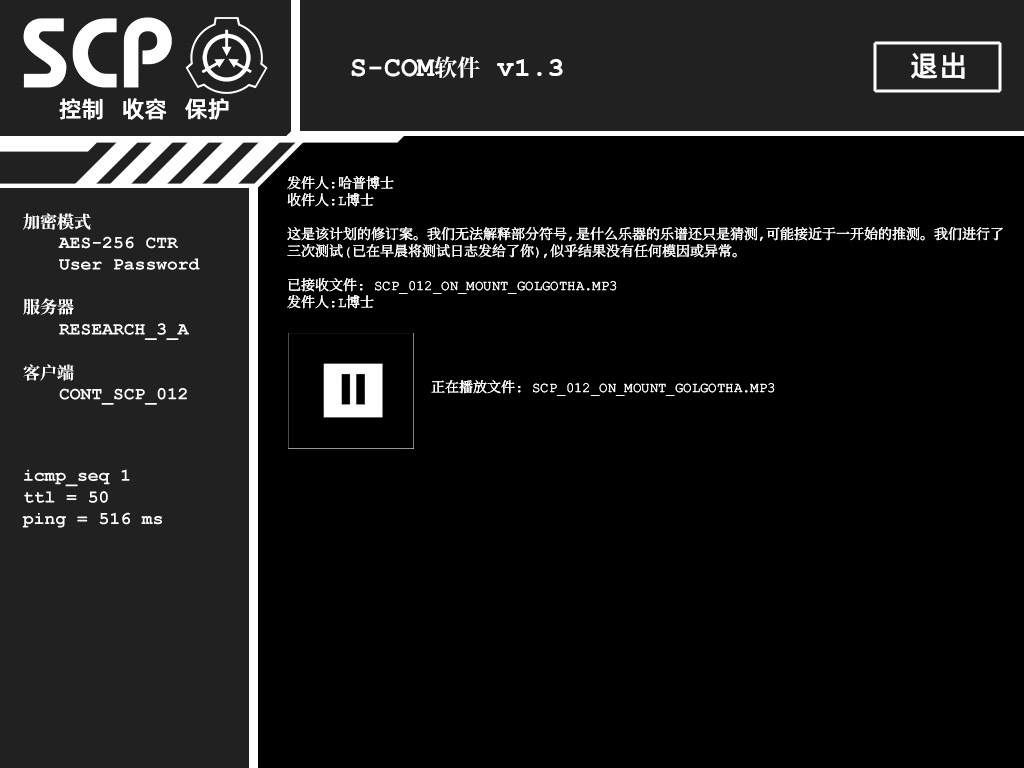
<style>
.page{position:relative;width:1024px;height:768px;background:#000000}
.page>*{position:absolute;margin:0}
.t1{font:29px "AlibabaPuHuiTiM";color:#ffffff}
.t2{font:28px "ContainmentBreach-Bold";color:#ffffff}
.t3{font:23px "ContainmentBreach-Bold";color:#ffffff}
.t4{font:28px "CourierNewPS-BoldMT";color:#ffffff}
.t5{font:23px "AlibabaPuHuiTiM";color:#ffffff}
.t6{font:14px/17px "ContainmentBreach-Regular";color:#ffffff}
.t7{font:17px/17px "ContainmentBreach-Bold";color:#ffffff}
.t8{font:17px/15px "ContainmentBreach-Bold";color:#ffffff}
</style>
<div class="page">
<p class="t1" style="left:911px;top:52px;width:54px;height:27px">退出</p>
<p class="t2" style="left:351px;top:56px;width:212px;height:22px">S-COM<span class="t3">软件 </span><span class="t4">v1.3</span></p>
<p class="t5" style="left:59px;top:98px;width:170px;height:22px">控制   收容   保护</p>
<p class="t6" style="left:287px;top:176px;width:716px;height:220px">发件人：哈普博士<br>收件人：L博士<br><br>这是该计划的修订案。我们无法解释部分符号，是什么乐器的乐谱还只是猜测，可能接近于一开始的推测。我们进行了<br>三次测试（已在早晨将测试日志发给了你），似乎结果没有任何模因或异常。<br><br>已接收文件： SCP_012_ON_MOUNT_GOLGOTHA.MP3<br>发件人：L博士<br><br><br><br>    <br>    正在播放文件： SCP_012_ON_MOUNT_GOLGOTHA.MP3</p>
<p class="t7" style="left:23px;top:213px;width:68px;height:168px">加密模式<br><br><br><br><br>服务器<br><br><br><span class="t8"><br>客户端</span></p>
</div>
